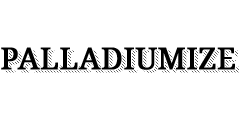
<style>
.page{position:relative;width:240px;height:127px;background:#ffffff}
.page>*{position:absolute;margin:0}
.t1{font:30px "DroidSerif";color:#000000;text-transform:uppercase;font-weight:bold}
</style>
<div class="page">
<p class="t1" style="left:1px;top:47px;width:234px;height:23px">Palladiumize</p>
</div>
